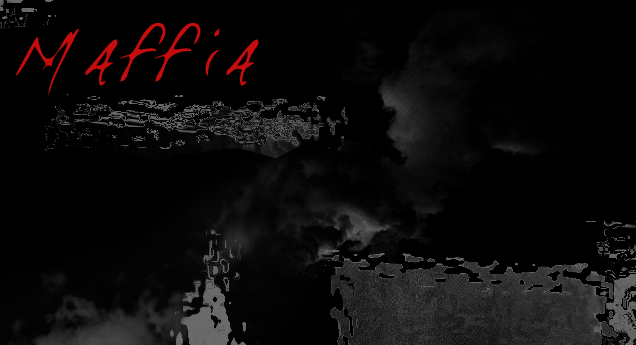
<style>
.page{position:relative;width:636px;height:345px;background:#000000}
.page>*{position:absolute;margin:0}
.t1{font:75px "GiffordsHand";color:#c60d0d}
</style>
<div class="page">
<p class="t1" style="left:15px;top:23px;width:244px;height:73px">Maffia</p>
</div>
